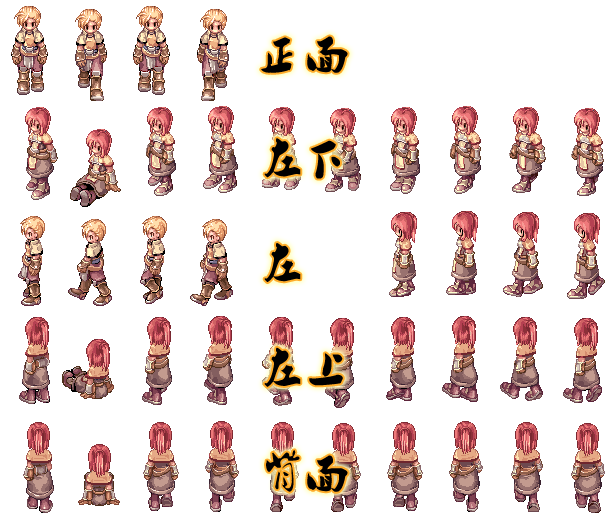
<style>
.page{position:relative;width:610px;height:525px;background:#ffffff}
.page>*{position:absolute;margin:0}
.t1{font:43px/104.7px "Ò¶¸ùÓÑÐÐÊé·±";color:#000000}
</style>
<div class="page">
<p class="t1" style="left:261px;top:36px;width:87px;height:456px">正面<br>左下<br>左<br>左上<br>背面</p>
</div>
